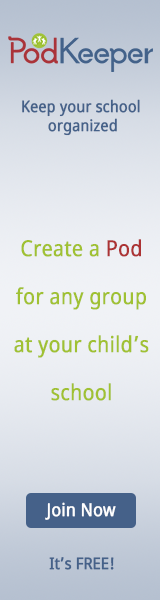
<style>
.page{position:relative;width:160px;height:600px}
.page>*{position:absolute;margin:0}
.t1{font:16px "NotoSans";color:#456189;font-weight:bold;scale:0.88 1}
.t2{font:22px/48px "NotoSans";color:#a0c133;font-weight:bold;scale:0.88 1}
.t3{font:22px/48px "NotoSans";color:#ac3334;font-weight:bold;scale:0.88 1}
.t4{font:18px "NotoSans";color:#ffffff;font-weight:bold;scale:0.88 1}
</style>
<div class="page">
<p class="t1" style="left:22px;top:99px;width:118px;height:37px;text-align:center">Keep your school <br>organized</p>
<p class="t2" style="left:14px;top:239px;width:135px;height:162px;text-align:center">Create a <span class="t3">Pod <br></span>for any group<br>at your child’s <br>school</p>
<p class="t4" style="left:45px;top:502px;width:71px;height:18px">Join Now</p>
<p class="t1" style="left:49px;top:557px;width:65px;height:13px">It’s FREE!</p>
</div>
